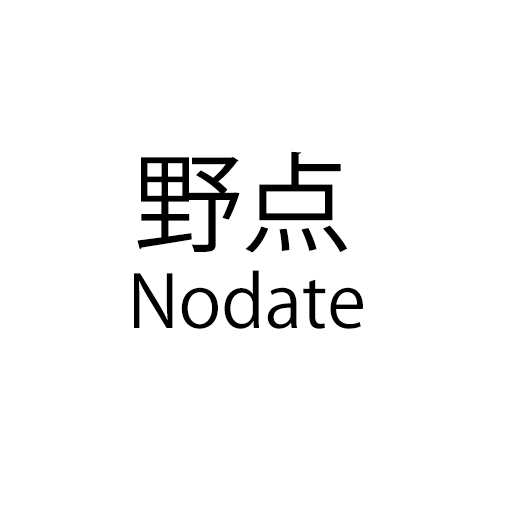
<style>
.page{position:relative;width:512px;height:512px;background:#ffffff}
.page>*{position:absolute;margin:0}
.t1{font:108px "KozGoPr6N-Regular";color:#000000}
.t2{font:72px "KozGoPr6N-Regular";color:#000000}
</style>
<div class="page">
<p class="t1" style="left:137px;top:151px;width:210px;height:102px">野点</p>
<p class="t2" style="left:134px;top:270px;width:229px;height:59px">Nodate</p>
</div>
